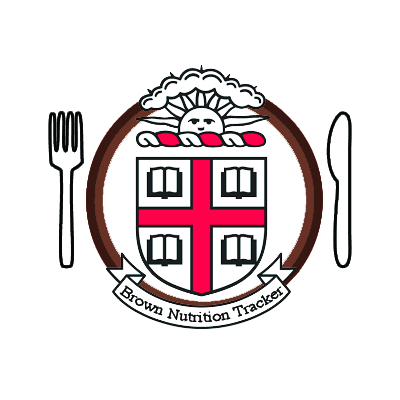
<style>
.page{position:relative;width:400px;height:400px;background:#ffffff}
.page>*{position:absolute;margin:0}
.t1{font:15px "Times-Roman";color:#060808}
</style>
<div class="page">
<p class="t1" style="left:119px;top:285px;width:165px;height:38px;rotate:-1deg">Brown Nutrition Tracker</p>
</div>
